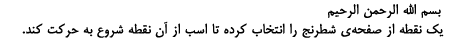
<style>
.page{position:relative;width:450px;height:45px;background:#ffffff}
.page>*{position:absolute;margin:0}
.t1{font:16.2px "BMitra";color:#000000;font-weight:bold}
</style>
<div class="page">
<p class="t1" style="left:22px;top:3px;width:422px;height:35px">بسم الله الرحمن الرحیم<br>  یک نقطه از صفحه‌ی شطرنج را انتخاب کرده تا اسب از آن نقطه شروع به حرکت کند.</p>
</div>
